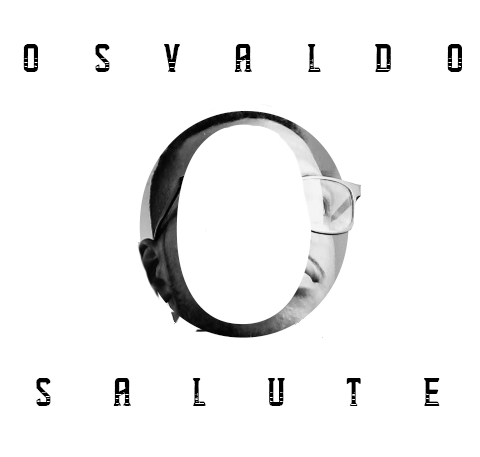
<style>
.page{position:relative;width:480px;height:457px;background:#ffffff}
.page>*{position:absolute;margin:0}
.t1{font:36px "SpeedyRetro";letter-spacing:1.5em;color:#000000}
.t2{font:312.2px "Georgia"}
.t3{font:36px "SpeedyRetro";letter-spacing:1.7em;color:#000000}
</style>
<div class="page">
<p class="t1" style="left:23px;top:44px;width:439px;height:28px">osvaldo</p>
<p class="t2" style="left:139px;top:110px;width:210px;height:228px;rotate:1deg">O</p>
<p class="t3" style="left:36px;top:378px;width:404px;height:28px">salute</p>
</div>
